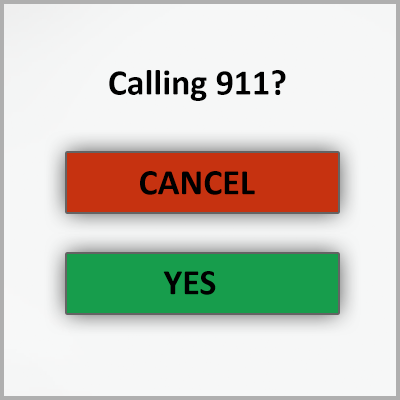
<style>
.page{position:relative;width:400px;height:400px;background:#f6f7f7}
.page>*{position:absolute;margin:0}
.t1{font:36px "Calibri-Bold";color:#000000}
</style>
<div class="page">
<p class="t1" style="left:109px;top:70px;width:177px;height:31px">Calling 911?</p>
<p class="t1" style="left:140px;top:171px;width:115px;height:24px">CANCEL</p>
<p class="t1" style="left:163px;top:271px;width:53px;height:24px">YES</p>
</div>
